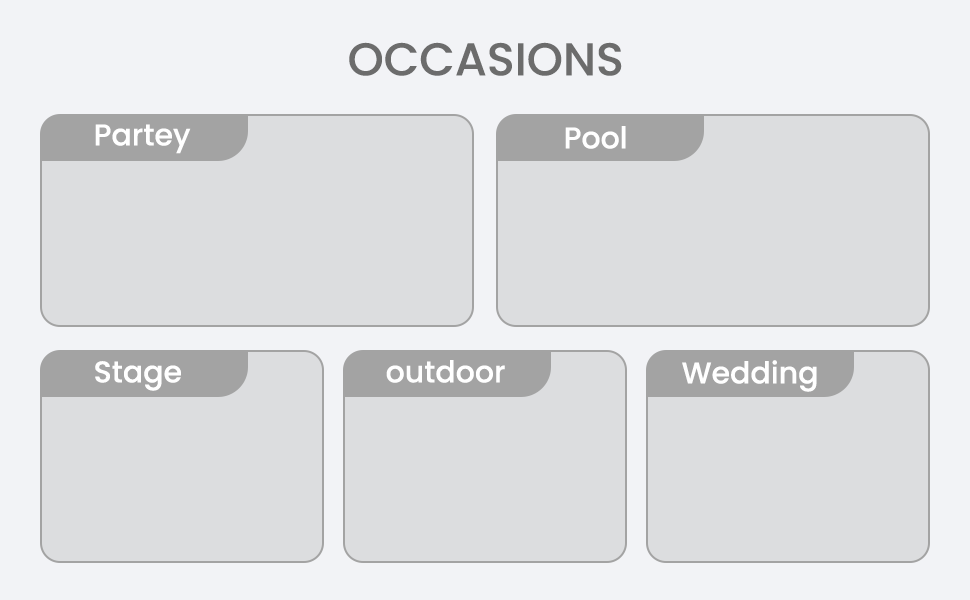
<style>
.page{position:relative;width:970px;height:600px;background:#dcdddf}
.page>*{position:absolute;margin:0}
.t1{font:46px "Poppins-Medium";color:#6c6c6c;text-transform:uppercase}
.t2{font:30px "Poppins-Medium";color:#ffffff}
</style>
<div class="page">
<p class="t1" style="left:349px;top:42px;width:273px;height:34px">Occasions</p>
<p class="t2" style="left:95px;top:124px;width:96px;height:30px">Partey</p>
<p class="t2" style="left:565px;top:126px;width:61px;height:23px">Pool</p>
<p class="t2" style="left:95px;top:361px;width:86px;height:30px">Stage</p>
<p class="t2" style="left:386px;top:360px;width:119px;height:23px">outdoor</p>
<p class="t2" style="left:682px;top:360px;width:135px;height:32px">Wedding</p>
</div>
